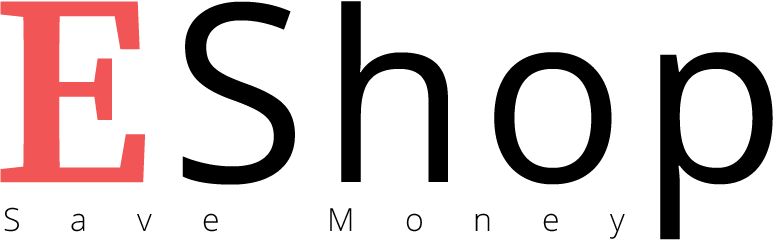
<style>
.page{position:relative;width:784px;height:240px;background:#ffffff}
.page>*{position:absolute;margin:0}
.t1{font:238px "OpenSans-Regular";letter-spacing:0.06em;color:#000000}
.t2{font:272px "SourceSerifRoman-Semibold";letter-spacing:0.06em;color:#f15555}
.t3{font:249px "OpenSans-Regular";letter-spacing:0.06em;color:#000000}
.t4{font:32px "OpenSans-Light";letter-spacing:1.56em;color:#000000}
</style>
<div class="page">
<p class="t1" style="left:0px;top:1px;width:773px;height:239px"><span class="t2">E</span><span class="t3">S</span>hop</p>
<p class="t4" style="left:4px;top:207px;width:621px;height:32px">Save Money</p>
</div>
